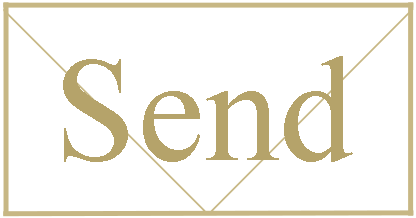
<style>
.page{position:relative;width:416px;height:218px;background:#ffffff}
.page>*{position:absolute;margin:0}
.t1{font:150px "TimesNewRomanPSMT";color:#b5a36a}
</style>
<div class="page">
<p class="t1" style="left:63px;top:56px;width:290px;height:106px">Send</p>
</div>
